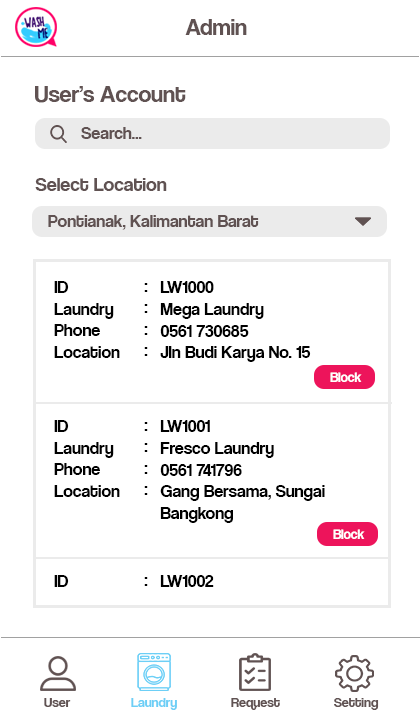
<style>
.page{position:relative;width:420px;height:720px;background:#ffffff}
.page>*{position:absolute;margin:0}
.t1{font:24px "CoolveticaRg-Regular";color:#605252}
.t2{font:18px "CoolveticaRg-Regular";color:#605252}
.t3{font:20px "CoolveticaRg-Regular";color:#605252}
.t4{font:18px "CoolveticaRg-Regular";color:#010101}
.t5{font:18px "CoolveticaRg-Regular";color:#000000}
.t6{font:15.4px "CoolveticaRg-Regular";color:#ffffff;scale:0.89 1}
.t7{font:14px "CoolveticaRg-Regular";color:#605252}
.t8{font:14px "CoolveticaRg-Regular";color:#6dcff6}
</style>
<div class="page">
<p class="t1" style="left:185px;top:19px;width:62px;height:16px">Admin</p>
<p class="t1" style="left:35px;top:86px;width:151px;height:17px">User’s Account</p>
<p class="t2" style="left:81px;top:127px;width:61px;height:12px">Search...</p>
<p class="t3" style="left:35px;top:178px;width:132px;height:13px">Select Location</p>
<p class="t2" style="left:48px;top:215px;width:211px;height:15px">Pontianak, Kalimantan Barat</p>
<p class="t4" style="left:54px;top:281px;width:66px;height:77px">ID<br>Laundry <br>Phone <br>Location</p>
<p class="t5" style="left:160px;top:281px;width:151px;height:81px">LW1000<br>Mega Laundry<br>0561 730685<br>Jln Budi Karya No. 15</p>
<p class="t5" style="left:144px;top:283px;width:4px;height:73px">:<br>:<br>:<br>:</p>
<p class="t6" style="left:330px;top:372px;width:32px;height:10px">Block</p>
<p class="t4" style="left:54px;top:420px;width:66px;height:77px">ID<br>Laundry <br>Phone <br>Location</p>
<p class="t5" style="left:144px;top:422px;width:4px;height:73px">:<br>:<br>:<br>:</p>
<p class="t5" style="left:160px;top:420px;width:165px;height:103px">LW1001<br>Fresco Laundry<br>0561 741796<br>Gang Bersama, Sungai<br>Bangkong</p>
<p class="t6" style="left:333px;top:529px;width:32px;height:10px">Block</p>
<p class="t4" style="left:54px;top:575px;width:15px;height:12px">ID</p>
<p class="t5" style="left:144px;top:577px;width:4px;height:9px">:</p>
<p class="t5" style="left:160px;top:575px;width:54px;height:12px">LW1002</p>
<p class="t7" style="left:44px;top:698px;width:27px;height:9px">User</p>
<p class="t8" style="left:131px;top:698px;width:46px;height:12px">Laundry</p>
<p class="t7" style="left:231px;top:698px;width:49px;height:12px">Request</p>
<p class="t7" style="left:334px;top:698px;width:45px;height:12px">Setting</p>
</div>
